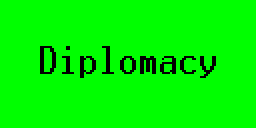
<style>
.page{position:relative;width:256px;height:128px;background:#00ff00}
.page>*{position:absolute;margin:0}
.t1{font:36px "Terminal";color:#000000}
</style>
<div class="page">
<p class="t1" style="left:40px;top:46px;width:176px;height:32px">Diplomacy</p>
</div>
